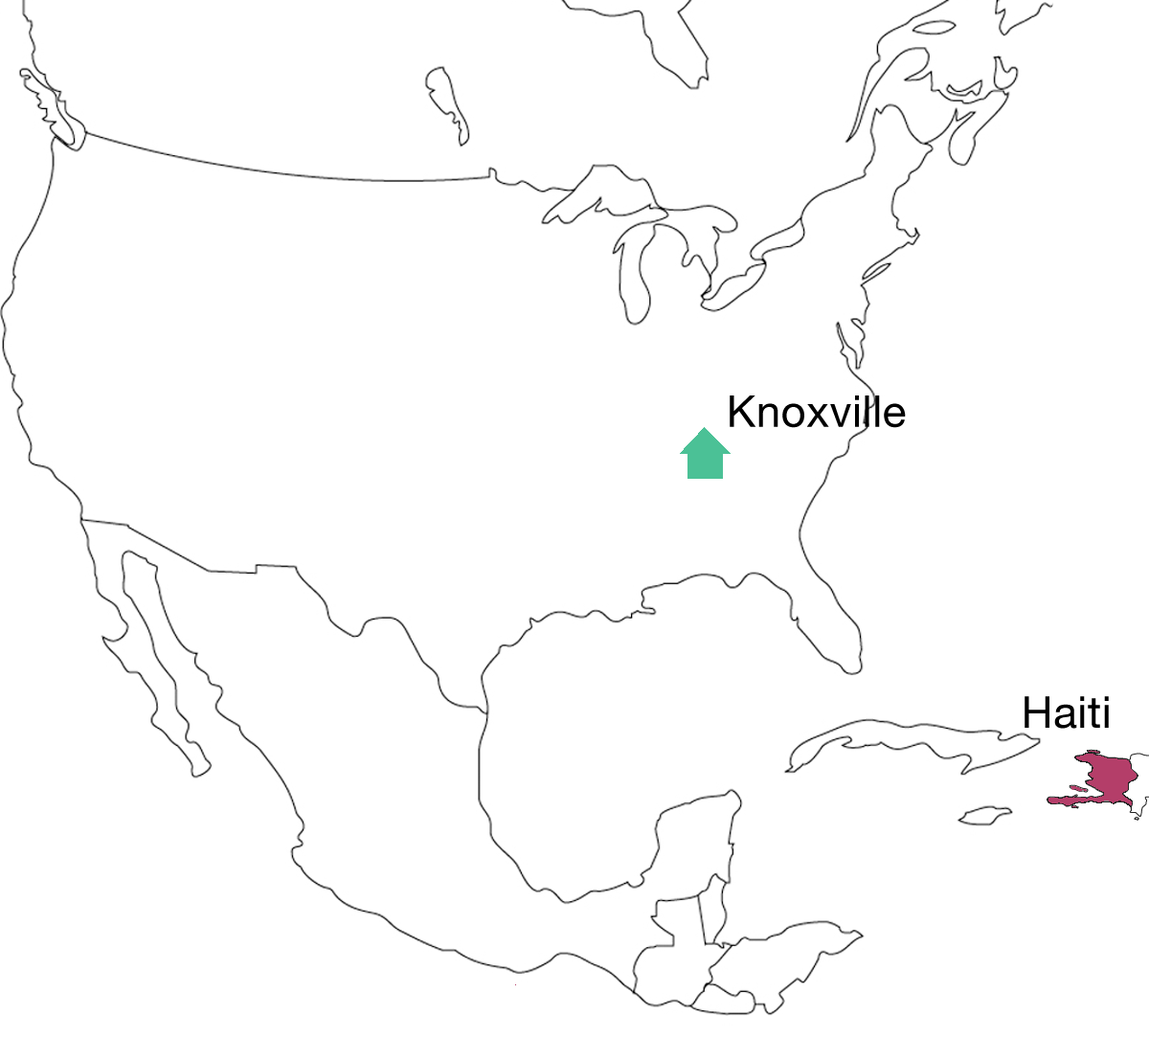
<style>
.page{position:relative;width:1149px;height:1038px;background:#ffffff}
.page>*{position:absolute;margin:0}
.t1{font:43.9px "HelveticaNeue";letter-spacing:0.01em;color:#000000}
</style>
<div class="page">
<p class="t1" style="left:730px;top:395px;width:176px;height:33px">Knoxville</p>
<p class="t1" style="left:1024px;top:696px;width:85px;height:33px">Haiti</p>
</div>
